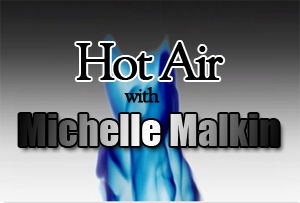
<style>
.page{position:relative;width:300px;height:203px}
.page>*{position:absolute;margin:0}
.t1{font:51.1px "GoudyOldStyleBT-Roman";letter-spacing:-0.075em;color:#000000;font-weight:bold}
.t2{font:21.1px "GoudyOldStyleBT-Roman";letter-spacing:-0.075em;color:#000000;font-weight:bold}
.t3{font:40.3px "Impact"}
</style>
<div class="page">
<p class="t1" style="left:76px;top:42px;width:148px;height:38px">Hot Air</p>
<p class="t2" style="left:124px;top:87px;width:36px;height:16px">with</p>
<p class="t3" style="left:19px;top:114px;width:260px;height:32px">Michelle Malkin</p>
</div>
